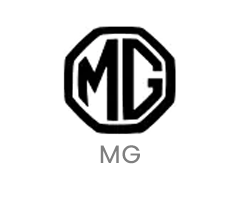
<style>
.page{position:relative;width:240px;height:200px;background:#ffffff}
.page>*{position:absolute;margin:0}
.t1{font:25px "Poppins-Regular";letter-spacing:0.04em;color:#7f7f7f}
</style>
<div class="page">
<p class="t1" style="left:100px;top:145px;width:40px;height:19px">MG</p>
</div>
